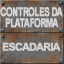
<style>
.page{position:relative;width:64px;height:64px}
.page>*{position:absolute;margin:0}
.t1{font:12px/10.7px "Arial-BoldMT";letter-spacing:-0.08em;color:#d6d6d6;text-transform:uppercase;font-weight:bold;scale:0.7 1}
.t2{font:10.7px "Arial-BoldMT";letter-spacing:-0.06em;color:#d5d5d5;text-transform:uppercase}
</style>
<div class="page">
<p class="t1" style="left:0px;top:7px;width:63px;height:21px;text-align:center">Controles da<br>plataforma</p>
<p class="t2" style="left:2px;top:42px;width:59px;height:9px">Escadaria</p>
</div>
